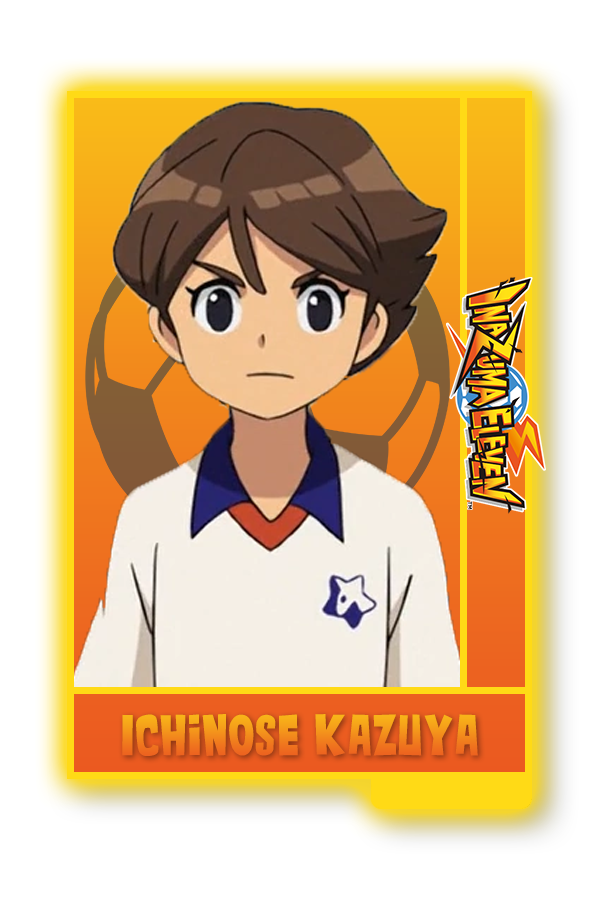
<style>
.page{position:relative;width:600px;height:900px;background:#ffffff}
.page>*{position:absolute;margin:0}
.t1{font:60.3px "TTG-Bold"}
</style>
<div class="page">
<p class="t1" style="left:122px;top:714px;width:356px;height:43px">Ichinose Kazuya</p>
</div>
